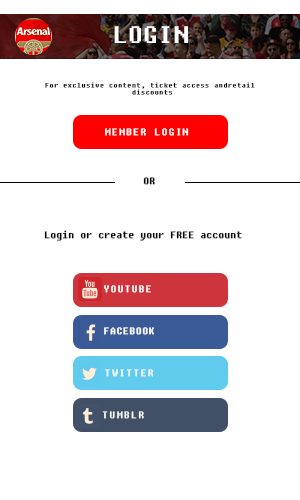
<style>
.page{position:relative;width:300px;height:500px;background:#ffffff}
.page>*{position:absolute;margin:0}
.t1{font:30px "Fixedsys";color:#fffefe}
.t2{font:9.2px/6.6px "Fixedsys";color:#000000}
.t3{font:14.4px "Fixedsys";color:#ffffff}
.t4{font:12px "Fixedsys";color:#000000}
.t5{font:14px "Fixedsys";color:#ffffff}
.t6{font:12.7px "Fixedsys";color:#fefeff}
</style>
<div class="page">
<p class="t1" style="left:114px;top:26px;width:74px;height:17px">LOGIN</p>
<p class="t2" style="left:45px;top:82px;width:210px;height:13px;text-align:center">For exclusive content, ticket access andretail <br>discounts</p>
<p class="t3" style="left:105px;top:128px;width:84px;height:8px">MEMBER LOGIN</p>
<p class="t4" style="left:143px;top:177px;width:12px;height:8px">OR</p>
<p class="t4" style="left:44px;top:230px;width:198px;height:11px">Login or create your FREE account</p>
<p class="t5" style="left:104px;top:285px;width:47px;height:8px">YOUTUBE</p>
<p class="t6" style="left:104px;top:327px;width:50px;height:8px">FACEBOOK</p>
<p class="t3" style="left:105px;top:369px;width:49px;height:8px">TWITTER</p>
<p class="t3" style="left:102px;top:411px;width:42px;height:8px">TUMBLR</p>
</div>
